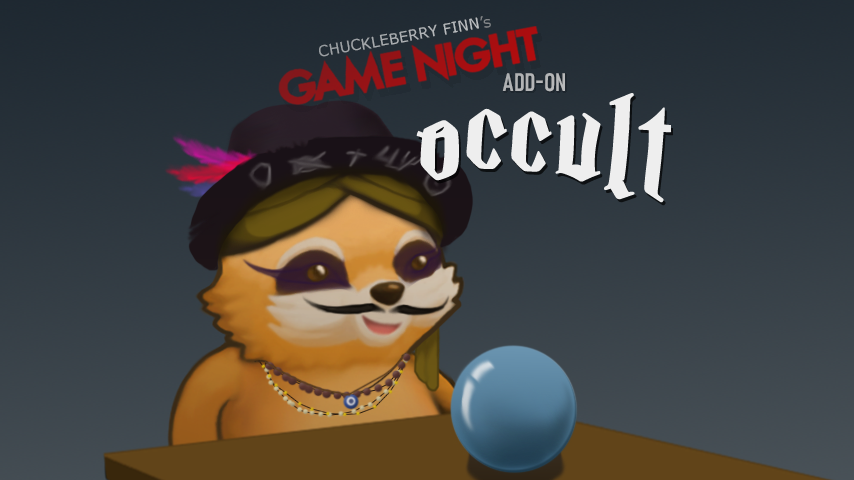
<style>
.page{position:relative;width:854px;height:480px}
.page>*{position:absolute;margin:0}
.t1{font:15px "Verdana";color:#ffffff}
.t2{font:15px "Verdana";color:#ababab}
.t3{font:25px "Bahnschrift-SemiBoldCondensed";color:#b4b5b7}
.t4{font:150px "MagicSchoolOne";color:#eeeeee;font-weight:bold}
</style>
<div class="page">
<p class="t1" style="left:319px;top:16px;width:172px;height:41px;rotate:-10deg">CHUCKLEBERRY FINN<span class="t2">’s</span></p>
<p class="t3" style="left:502px;top:73px;width:63px;height:19px">ADD-ON</p>
<p class="t4" style="left:416px;top:93px;width:256px;height:110px;rotate:3deg">occult</p>
</div>
